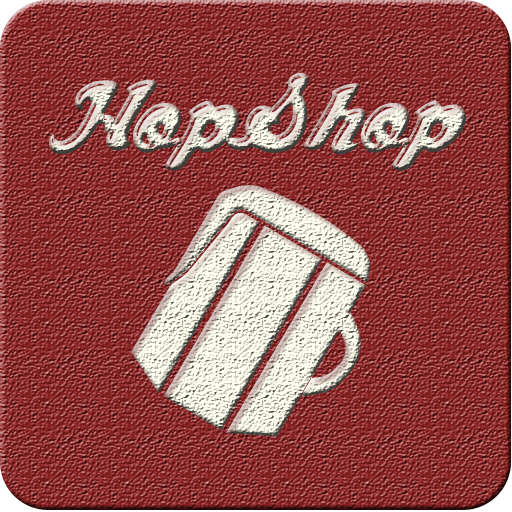
<style>
.page{position:relative;width:512px;height:512px}
.page>*{position:absolute;margin:0}
.t1{font:144px "ChocolateDealer-Bold";letter-spacing:-0.01em}
</style>
<div class="page">
<p class="t1" style="left:49px;top:72px;width:417px;height:99px">HopShop</p>
</div>
